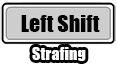
<style>
.page{position:relative;width:116px;height:65px;background:#ffffff}
.page>*{position:absolute;margin:0}
.t1{font:21.9px "Impact";color:#000000}
.t2{font:16.4px "Impact";color:#ffffff}
</style>
<div class="page">
<p class="t1" style="left:21px;top:15px;width:79px;height:17px">Left Shift</p>
<p class="t2" style="left:32px;top:47px;width:54px;height:14px">Strafing</p>
</div>
